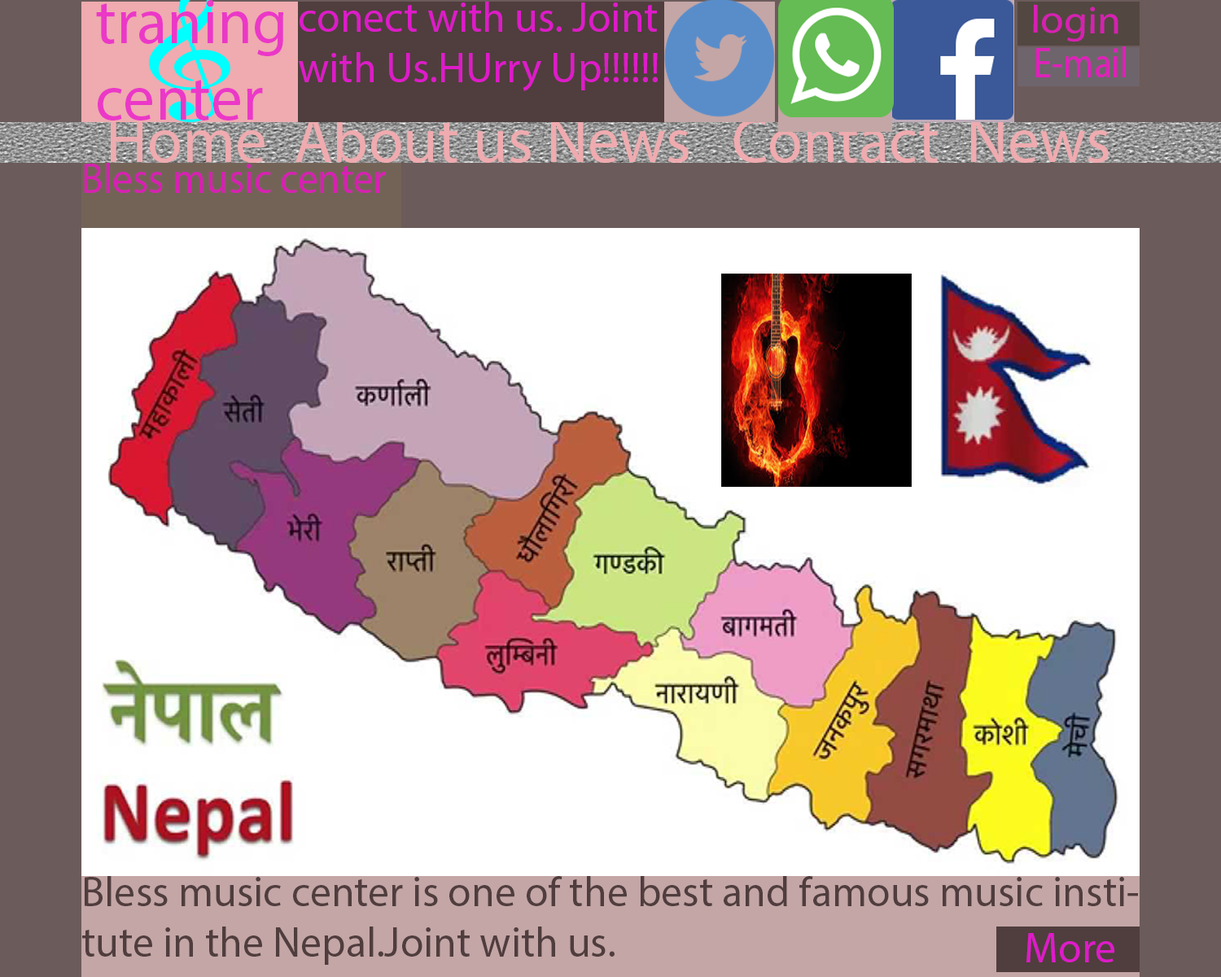
<style>
.page{position:relative;width:1221px;height:977px;background:#ffffff}
.page>*{position:absolute;margin:0}
.t1{font:63.5px "MyriadPro-Regular";color:#eb38c7}
.t2{font:42.3px "MyriadPro-Regular";color:#de1bc9}
.t3{font:39.2px "MyriadPro-Regular";color:#d720b2;scale:1.08 1}
.t4{font:42.7px "MyriadPro-Regular";color:#e11fba;scale:0.86 1}
.t5{font:63.5px "MyriadPro-Regular";color:#efabaf}
.t6{font:42.3px "MyriadPro-Regular";color:#d720b2;scale:0.95 1}
.t7{font:42.3px "MyriadPro-Regular";color:#503d3d}
.t8{font:42.5px "MyriadPro-Regular";color:#de1bc9}
</style>
<div class="page">
<p class="t1" style="left:96px;top:0px;width:187px;height:120px">traning<br>center</p>
<p class="t2" style="left:299px;top:2px;width:359px;height:89px">conect with us. Joint with Us.HUrry Up!!!!!!</p>
<p class="t3" style="left:1033px;top:4px;width:85px;height:38px">login</p>
<p class="t4" style="left:1036px;top:46px;width:90px;height:31px">E-mail</p>
<p class="t5" style="left:111px;top:117px;width:998px;height:46px">Home  About us News   Contact  News</p>
<p class="t6" style="left:84px;top:163px;width:302px;height:30px">Bless music center</p>
<p class="t7" style="left:82px;top:876px;width:1056px;height:88px">Bless music center is one of the best and famous music institute in the Nepal.Joint with us.</p>
<p class="t8" style="left:1026px;top:933px;width:88px;height:29px">More</p>
</div>
